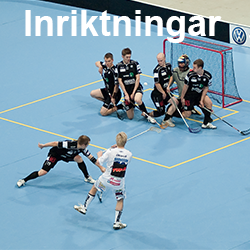
<style>
.page{position:relative;width:250px;height:250px}
.page>*{position:absolute;margin:0}
.t1{font:36px "Arial-BoldMT";color:#ffffff}
</style>
<div class="page">
<p class="t1" style="left:25px;top:10px;width:197px;height:33px">Inriktningar</p>
</div>
